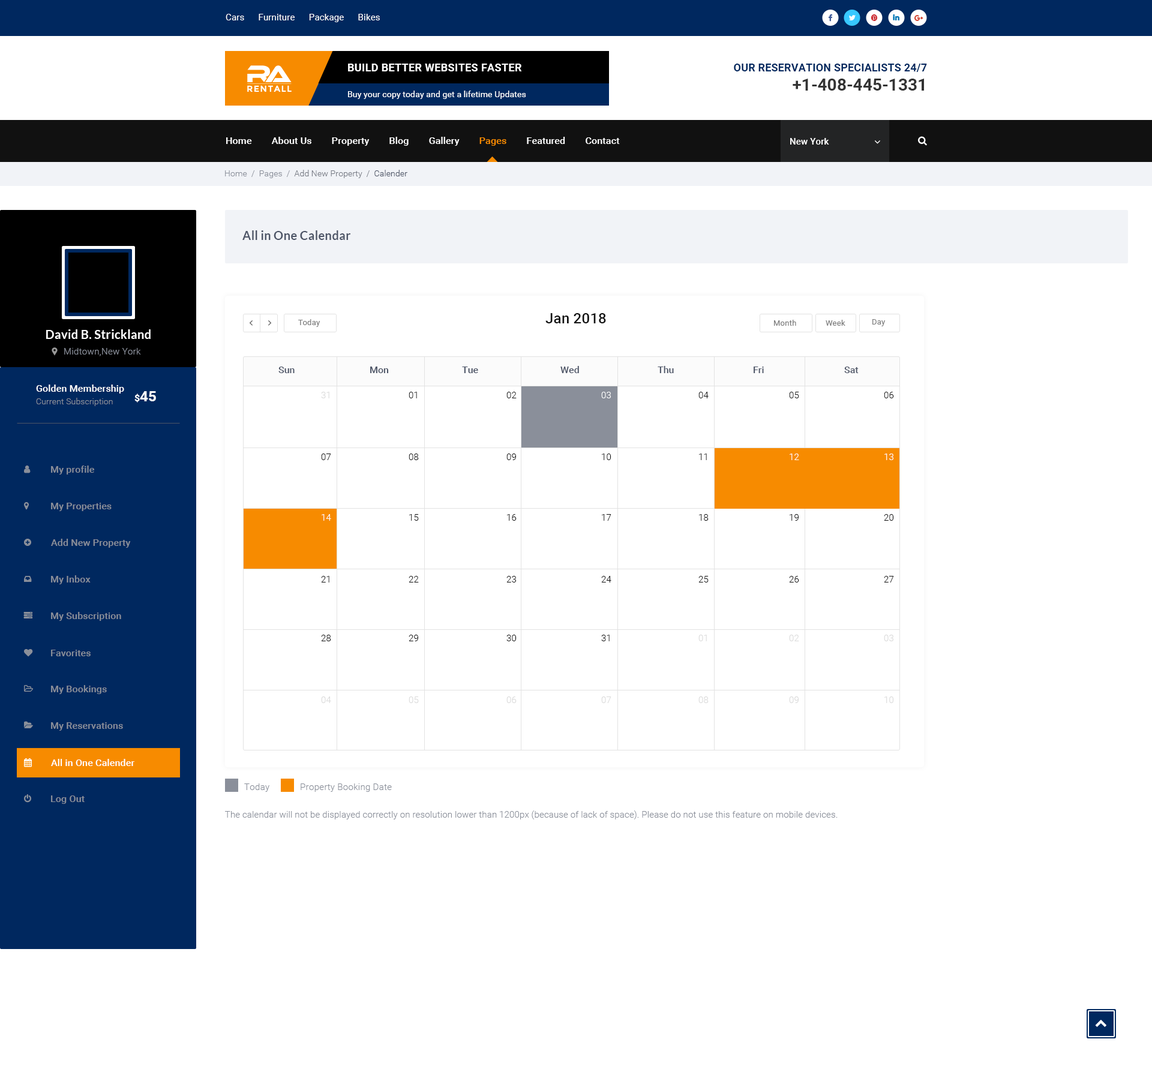
<style>
.page{position:relative;width:1152px;height:1072px;background:#ffffff}
.page>*{position:absolute;margin:0}
.t1{font:9px "Roboto-Regular";letter-spacing:0.01em;color:#ffffff}
.t2{font:10.8px "Roboto-Bold";letter-spacing:0.02em;color:#ffffff;text-transform:uppercase}
.t3{font:10.8px "Roboto-Bold";letter-spacing:0.01em;color:#00285f;text-transform:uppercase}
.t4{font:8.7px "Montserrat-Bold";letter-spacing:0.08em;color:#ffffff;text-transform:uppercase}
.t5{font:16.8px "Roboto-Bold";color:#333333}
.t6{font:8.4px "Roboto-Regular";letter-spacing:0.01em;color:#ffffff}
.t7{font:9.6px "Roboto-Medium";letter-spacing:0.01em;color:#ffffff}
.t8{font:9.6px "Roboto-Medium";letter-spacing:0.01em;color:#f78b00}
.t9{font:9px "Roboto-Medium";letter-spacing:0.01em;color:#ffffff}
.t10{font:8.4px "Roboto-Light";letter-spacing:0.01em;color:#757983}
.t11{font:8.4px "Roboto-Light";letter-spacing:0.01em;color:#8a8f9a}
.t12{font:8.4px "Roboto-Light";letter-spacing:0.01em;color:#4d5567}
.t13{font:12px "Lato-Bold";letter-spacing:0.01em;color:#4d5567}
.t14{font:14.4px "Roboto-Medium";letter-spacing:0.01em;color:#111111}
.t15{font:12px "Lato-Bold";letter-spacing:0.01em;color:#ffffff}
.t16{font:7.8px "Roboto-Regular";letter-spacing:0.02em;color:#7c7c7c}
.t17{font:9px "Roboto-Light";letter-spacing:0.01em;color:#8a8f9a}
.t18{font:9.6px "Roboto-Medium";color:#4d5567}
.t19{font:14.4px "Roboto-Bold";letter-spacing:0.01em;color:#ffffff}
.t20{font:9.6px "Roboto-Bold";letter-spacing:0.01em;color:#ffffff}
.t21{font:9px "Roboto-Light";letter-spacing:0.02em;color:#dadada}
.t22{font:9px "Roboto-Light";letter-spacing:0.02em;color:#111111}
.t23{font:9px "Roboto-Light";letter-spacing:0.02em;color:#ffffff}
.t24{font:9.6px "Roboto-Medium";letter-spacing:0.01em;color:#8a8f9a}
</style>
<div class="page">
<p class="t1" style="left:226px;top:14px;width:154px;height:8px">Cars      Furniture      Package      Bikes</p>
<p class="t2" style="left:348px;top:64px;width:174px;height:7px">Build better Websites Faster</p>
<p class="t3" style="left:734px;top:64px;width:193px;height:8px">Our Reservation Specialists 24/7</p>
<p class="t4" style="left:247px;top:85px;width:45px;height:7px">RentAll</p>
<p class="t5" style="left:793px;top:79px;width:131px;height:12px">+1-408-445-1331</p>
<p class="t6" style="left:348px;top:91px;width:178px;height:8px">Buy your copy today and get a lifetime Updates</p>
<p class="t7" style="left:226px;top:137px;width:394px;height:9px">Home        About Us        Property        Blog        Gallery        <span class="t8">Pages</span>        Featured        Contact</p>
<p class="t9" style="left:790px;top:138px;width:39px;height:7px">New York</p>
<p class="t10" style="left:225px;top:170px;width:182px;height:8px"><span class="t11">Home  /  Pages  /  </span>Add New Property  /  <span class="t12">Calender</span></p>
<p class="t13" style="left:242px;top:230px;width:109px;height:10px">All in One Calendar</p>
<p class="t14" style="left:545px;top:313px;width:61px;height:10px">Jan 2018</p>
<p class="t15" style="left:46px;top:329px;width:105px;height:10px">David B. Strickland</p>
<p class="t16" style="left:298px;top:319px;width:22px;height:8px">Today</p>
<p class="t16" style="left:774px;top:320px;width:22px;height:6px">Month</p>
<p class="t16" style="left:826px;top:320px;width:19px;height:6px">Week</p>
<p class="t16" style="left:872px;top:319px;width:14px;height:7px">Day</p>
<p class="t17" style="left:64px;top:348px;width:77px;height:8px">Midtown,New York</p>
<p class="t18" style="left:560px;top:366px;width:19px;height:7px">Wed</p>
<p class="t18" style="left:658px;top:366px;width:16px;height:7px">Thu</p>
<p class="t18" style="left:278px;top:367px;width:17px;height:6px">Sun</p>
<p class="t18" style="left:370px;top:367px;width:19px;height:6px">Mon</p>
<p class="t18" style="left:462px;top:367px;width:16px;height:6px">Tue</p>
<p class="t18" style="left:754px;top:367px;width:10px;height:6px">Fri</p>
<p class="t18" style="left:844px;top:367px;width:15px;height:6px">Sat</p>
<p class="t7" style="left:36px;top:385px;width:88px;height:9px">Golden Membership</p>
<p class="t11" style="left:36px;top:398px;width:77px;height:8px">Current Subscription</p>
<p class="t19" style="left:134px;top:391px;width:22px;height:12px"><span class="t20">$</span>45</p>
<p class="t21" style="left:321px;top:392px;width:8px;height:6px">31</p>
<p class="t22" style="left:409px;top:392px;width:8px;height:6px">01</p>
<p class="t22" style="left:506px;top:392px;width:11px;height:6px">02</p>
<p class="t23" style="left:601px;top:392px;width:10px;height:6px">03</p>
<p class="t22" style="left:698px;top:392px;width:11px;height:6px">04</p>
<p class="t22" style="left:789px;top:392px;width:10px;height:6px">05</p>
<p class="t22" style="left:884px;top:392px;width:10px;height:6px">06</p>
<p class="t22" style="left:321px;top:454px;width:10px;height:6px">07</p>
<p class="t22" style="left:409px;top:454px;width:10px;height:6px">08</p>
<p class="t22" style="left:506px;top:454px;width:10px;height:6px">09</p>
<p class="t22" style="left:602px;top:454px;width:9px;height:6px">10</p>
<p class="t22" style="left:699px;top:454px;width:8px;height:6px">11</p>
<p class="t23" style="left:790px;top:454px;width:9px;height:6px">12</p>
<p class="t23" style="left:884px;top:454px;width:9px;height:6px">13</p>
<p class="t24" style="left:51px;top:466px;width:43px;height:9px">My profile</p>
<p class="t24" style="left:51px;top:503px;width:61px;height:8px">My Properties</p>
<p class="t23" style="left:322px;top:514px;width:9px;height:7px">14</p>
<p class="t22" style="left:409px;top:514px;width:10px;height:7px">15</p>
<p class="t22" style="left:507px;top:514px;width:10px;height:7px">16</p>
<p class="t22" style="left:602px;top:514px;width:9px;height:7px">17</p>
<p class="t22" style="left:699px;top:514px;width:10px;height:7px">18</p>
<p class="t22" style="left:790px;top:514px;width:9px;height:7px">19</p>
<p class="t22" style="left:884px;top:514px;width:10px;height:7px">20</p>
<p class="t24" style="left:51px;top:539px;width:80px;height:9px">Add New Property</p>
<p class="t24" style="left:51px;top:575px;width:40px;height:9px">My Inbox</p>
<p class="t22" style="left:321px;top:576px;width:8px;height:7px">21</p>
<p class="t22" style="left:409px;top:576px;width:10px;height:7px">22</p>
<p class="t22" style="left:506px;top:576px;width:10px;height:7px">23</p>
<p class="t22" style="left:601px;top:576px;width:10px;height:7px">24</p>
<p class="t22" style="left:698px;top:576px;width:11px;height:7px">25</p>
<p class="t22" style="left:789px;top:576px;width:10px;height:7px">26</p>
<p class="t22" style="left:884px;top:576px;width:10px;height:7px">27</p>
<p class="t24" style="left:51px;top:612px;width:70px;height:9px">My Subscription</p>
<p class="t22" style="left:321px;top:635px;width:10px;height:6px">28</p>
<p class="t22" style="left:409px;top:635px;width:9px;height:6px">29</p>
<p class="t22" style="left:506px;top:635px;width:11px;height:6px">30</p>
<p class="t22" style="left:601px;top:635px;width:9px;height:6px">31</p>
<p class="t21" style="left:698px;top:635px;width:9px;height:6px">01</p>
<p class="t21" style="left:789px;top:635px;width:10px;height:6px">02</p>
<p class="t21" style="left:884px;top:635px;width:9px;height:6px">03</p>
<p class="t24" style="left:51px;top:650px;width:40px;height:6px">Favorites</p>
<p class="t24" style="left:51px;top:685px;width:56px;height:9px">My Bookings</p>
<p class="t21" style="left:321px;top:697px;width:10px;height:6px">04</p>
<p class="t21" style="left:409px;top:697px;width:10px;height:6px">05</p>
<p class="t21" style="left:506px;top:697px;width:11px;height:6px">06</p>
<p class="t21" style="left:601px;top:697px;width:10px;height:6px">07</p>
<p class="t21" style="left:698px;top:697px;width:11px;height:6px">08</p>
<p class="t21" style="left:789px;top:697px;width:10px;height:6px">09</p>
<p class="t21" style="left:884px;top:697px;width:10px;height:6px">10</p>
<p class="t24" style="left:51px;top:722px;width:72px;height:9px">My Reservations</p>
<p class="t7" style="left:51px;top:759px;width:83px;height:7px">All in One Calender</p>
<p class="t17" style="left:244px;top:784px;width:25px;height:8px">Today</p>
<p class="t17" style="left:301px;top:784px;width:91px;height:8px">Property Booking Date</p>
<p class="t24" style="left:51px;top:796px;width:34px;height:8px">Log Out</p>
<p class="t17" style="left:225px;top:811px;width:613px;height:9px">The calendar will not be displayed correctly on resolution lower than 1200px (because of lack of space). Please do not use this feature on mobile devices.</p>
</div>
